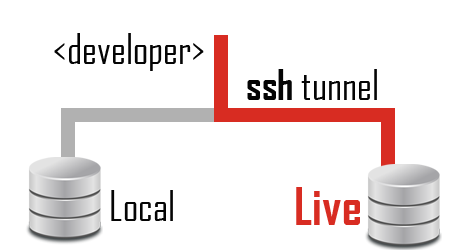
<style>
.page{position:relative;width:450px;height:250px;background:#ffffff}
.page>*{position:absolute;margin:0}
.t1{font:40px "AgencyFB-Reg";color:#040404}
.t2{font:40px "AgencyFB-Bold";color:#040404}
.t3{font:50px "AgencyFB-Bold";color:#d82c22}
</style>
<div class="page">
<p class="t1" style="left:54px;top:33px;width:150px;height:38px">&lt;developer&gt;</p>
<p class="t1" style="left:247px;top:69px;width:130px;height:31px"><span class="t2">ssh</span> tunnel</p>
<p class="t1" style="left:111px;top:190px;width:62px;height:31px">Local</p>
<p class="t3" style="left:296px;top:187px;width:64px;height:38px">Live</p>
</div>
